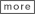
<style>
.page{position:relative;width:35px;height:14px;background:#ffffff}
.page>*{position:absolute;margin:0}
.t1{font:9.8px "Arial-BoldMT";letter-spacing:0.1em;color:#535353}
</style>
<div class="page">
<p class="t1" style="left:4px;top:4px;width:27px;height:6px">more</p>
</div>
